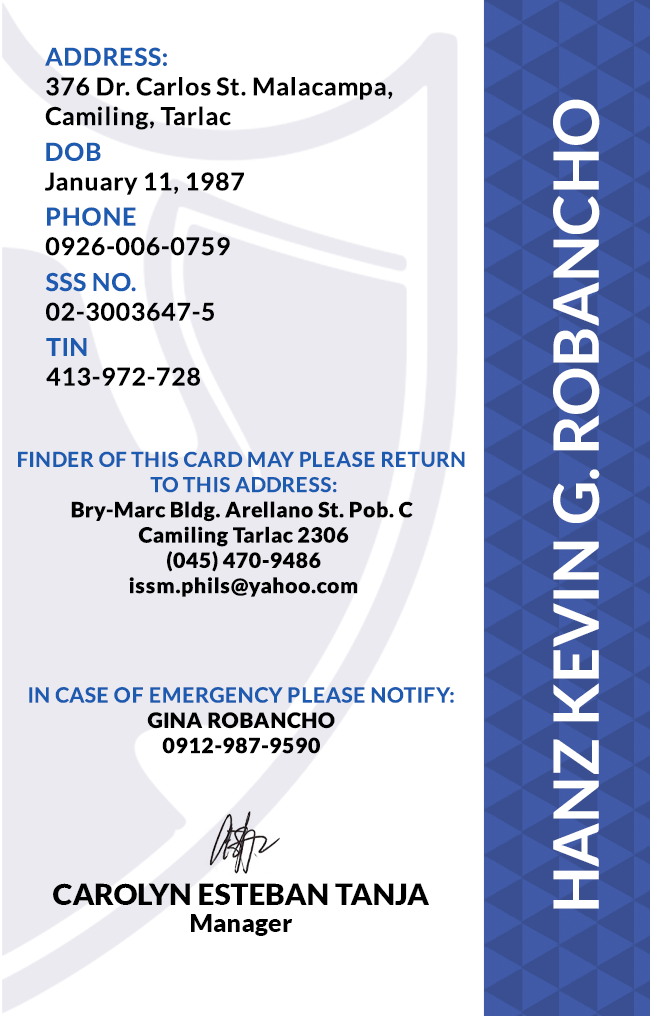
<style>
.page{position:relative;width:650px;height:1016px;background:#ffffff}
.page>*{position:absolute;margin:0}
.t1{font:24.7px/29.6px "Lato-Bold";letter-spacing:0.025em;color:#000000}
.t2{font:24.7px/29.6px "Lato-Bold";letter-spacing:0.025em;color:#1c5bb0}
.t3{font:62.5px "Lato-Bold";color:#ffffff}
.t4{font:21.1px "Lato-Black";letter-spacing:0.025em}
.t5{font:20.5px/25.3px "Lato-Bold";letter-spacing:0.025em;text-transform:uppercase}
.t6{font:21.1px/25.3px "Lato-Bold";letter-spacing:0.025em;color:#1c5bb0}
.t7{font:21.1px "Lato-Black";letter-spacing:0.025em;color:#000000}
.t8{font:29.5px "Lato-Black";color:#000000}
.t9{font:25px "Lato-Black";color:#000000}
</style>
<div class="page">
<p class="t1" style="left:45px;top:47px;width:348px;height:83px"><span class="t2">ADDRESS:<br></span>376 Dr. Carlos St. Malacampa,<br>Camiling, Tarlac</p>
<p class="t3" style="left:553px;top:99px;width:47px;height:810px;rotate:-90deg">HANZ KEVIN G. ROBANCHO</p>
<p class="t1" style="left:45px;top:142px;width:199px;height:53px"><span class="t2">DOB<br></span>January 11, 1987</p>
<p class="t1" style="left:45px;top:207px;width:185px;height:49px"><span class="t2">PHONE <br></span>0926-006-0759</p>
<p class="t1" style="left:45px;top:272px;width:169px;height:49px"><span class="t2">SSS NO.<br></span>02-3003647-5</p>
<p class="t1" style="left:46px;top:338px;width:154px;height:48px"><span class="t2">TIN<br></span>413-972-728</p>
<p class="t4" style="left:18px;top:451px;width:447px;height:146px;text-align:center"><span class="t5">Finder of this card may please return <br>to this address:<br></span>Bry-Marc Bldg. Arellano St. Pob. C <br>Camiling Tarlac 2306<br>(045) 470-9486<br>issm.phils@yahoo.com</p>
<p class="t6" style="left:29px;top:687px;width:425px;height:67px;text-align:center">IN CASE OF EMERGENCY PLEASE NOTIFY:<br><span class="t7">GINA ROBANCHO<br>0912-987-9590</span></p>
<p class="t8" style="left:53px;top:883px;width:376px;height:22px">CAROLYN ESTEBAN TANJA</p>
<p class="t9" style="left:191px;top:914px;width:102px;height:22px">Manager</p>
</div>
